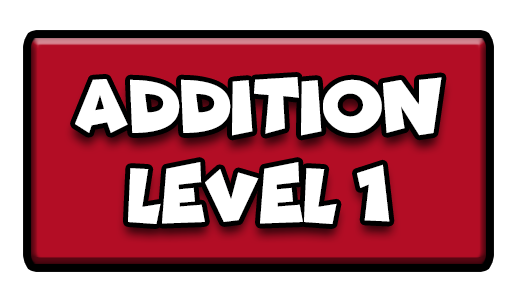
<style>
.page{position:relative;width:517px;height:301px;background:#ffffff}
.page>*{position:absolute;margin:0}
.t1{font:77.7px "Funhouse";color:#ffffff;scale:0.95 1}
</style>
<div class="page">
<p class="t1" style="left:75px;top:77px;width:367px;height:59px">ADDITION</p>
<p class="t1" style="left:128px;top:162px;width:262px;height:62px">LEVEL 1</p>
</div>
